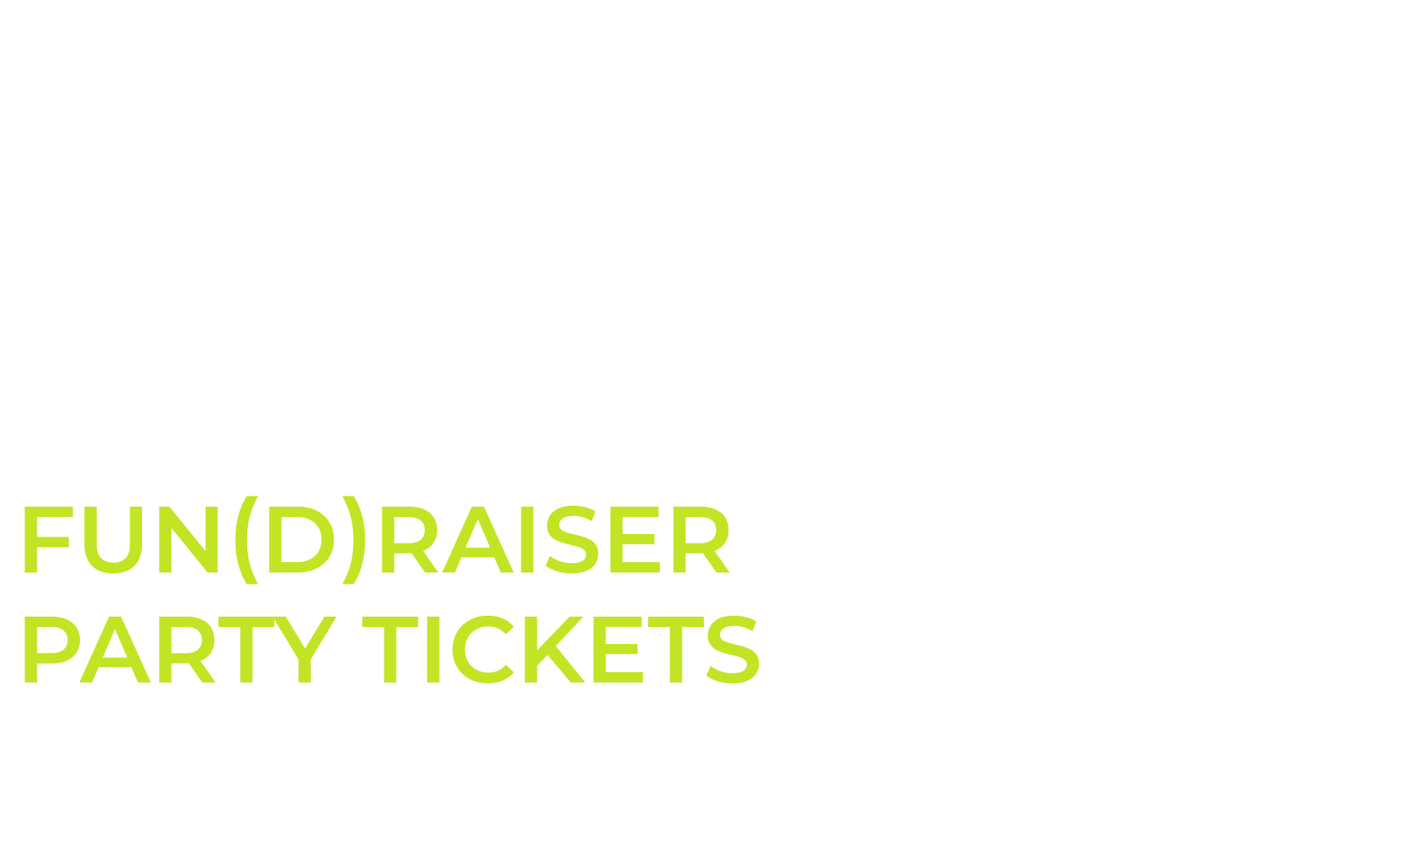
<style>
.page{position:relative;width:1410px;height:846px;background:#ffffff}
.page>*{position:absolute;margin:0}
.t1{font:94px/0.2px "Montserrat-SemiBold";color:#c1e524;text-transform:uppercase}
</style>
<div class="page">
<p class="t1" style="left:24px;top:495px;width:735px;height:188px">Fun(d)raiser<br>party tickets</p>
</div>
